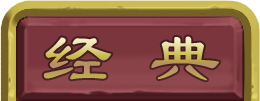
<style>
.page{position:relative;width:260px;height:101px}
.page>*{position:absolute;margin:0}
.t1{font:72px "LiSu"}
</style>
<div class="page">
<p class="t1" style="left:43px;top:36px;width:177px;height:45px">经 典</p>
</div>
